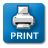
<style>
.page{position:relative;width:48px;height:48px;background:#ffffff}
.page>*{position:absolute;margin:0}
.t1{font:9px "ArialRoundedMTBold";letter-spacing:0.02em;color:#ffffff}
</style>
<div class="page">
<p class="t1" style="left:11px;top:32px;width:28px;height:7px">PRINT</p>
</div>
